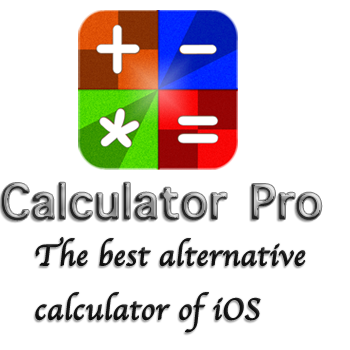
<style>
.page{position:relative;width:350px;height:350px;background:#ffffff}
.page>*{position:absolute;margin:0}
.t1{font:61.8px "AppleSymbols";font-weight:bold}
.t2{font:30.9px "Apple-Chancery";color:#111111;font-weight:bold}
</style>
<div class="page">
<p class="t1" style="left:2px;top:182px;width:320px;height:39px">Calculator Pro</p>
<p class="t2" style="left:35px;top:237px;width:271px;height:96px">The best alternative calculator of iOS</p>
</div>
